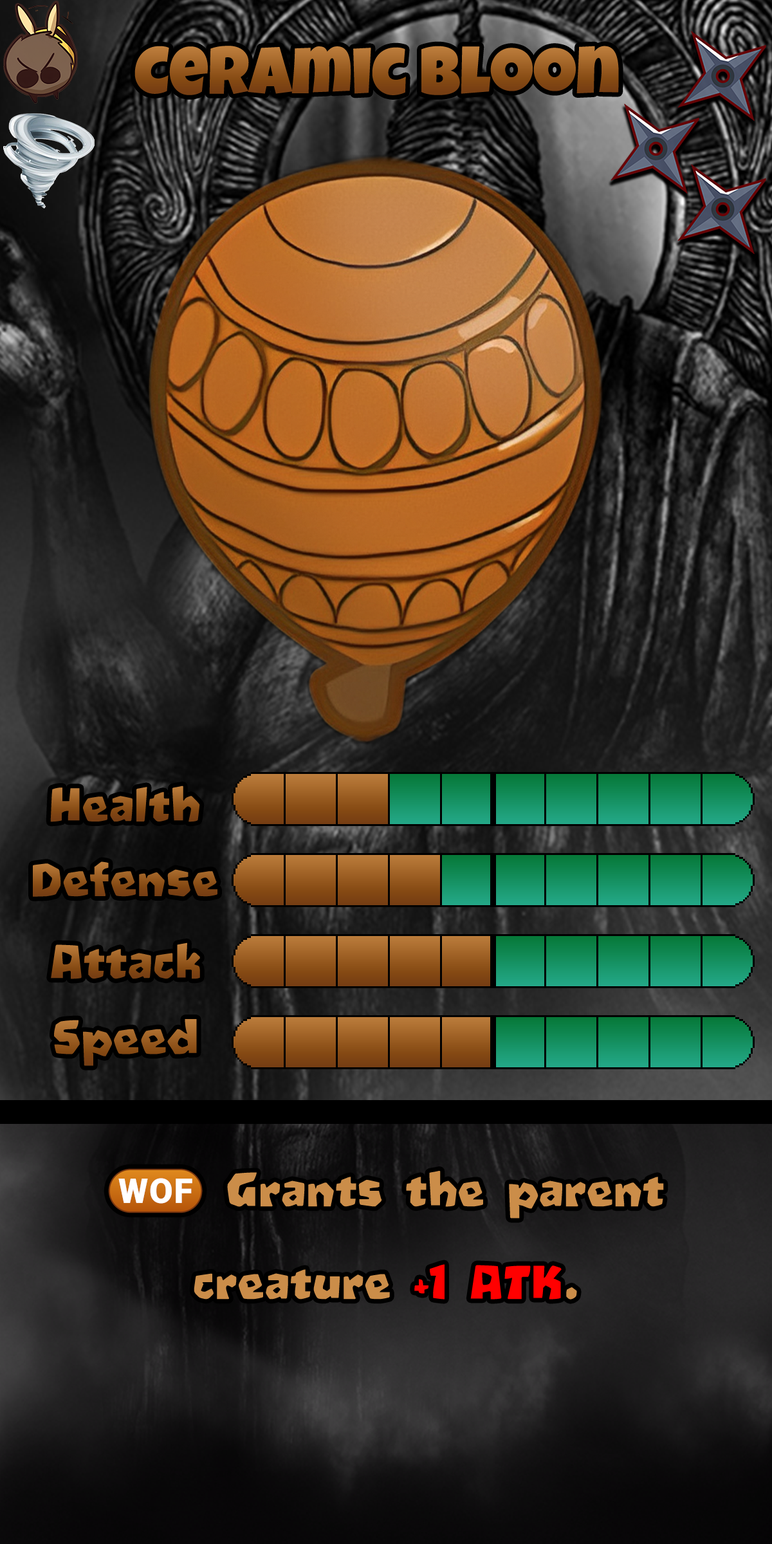
<style>
.page{position:relative;width:772px;height:1544px}
.page>*{position:absolute;margin:0}
.t1{font:115.8px "LuckiestGuy-Regular"}
.t2{font:77.2px "Oetztype"}
.t3{font:77.2px "Oetztype";color:#8c5018}
.t4{font:77.2px "Oetztype";color:#985b20}
.t5{font:77.2px "Oetztype";color:#cb8d49}
.t6{font:77.2px "stoogedings-Regular";color:#ffffff}
.t7{font:77.2px "Oetztype";color:#ff0000}
</style>
<div class="page">
<p class="t1" style="left:134px;top:46px;width:485px;height:49px">Ceramic Bloon</p>
<p class="t2" style="left:50px;top:786px;width:150px;height:36px">Health</p>
<p class="t3" style="left:33px;top:862px;width:184px;height:35px">Defense</p>
<p class="t2" style="left:51px;top:943px;width:149px;height:36px">Attack</p>
<p class="t4" style="left:54px;top:1019px;width:143px;height:47px">Speed</p>
<p class="t5" style="left:108px;top:1169px;width:556px;height:131px"><span class="t6">(WOF)</span> Grants the parent creature <span class="t7">+1 ATK</span>.</p>
</div>
